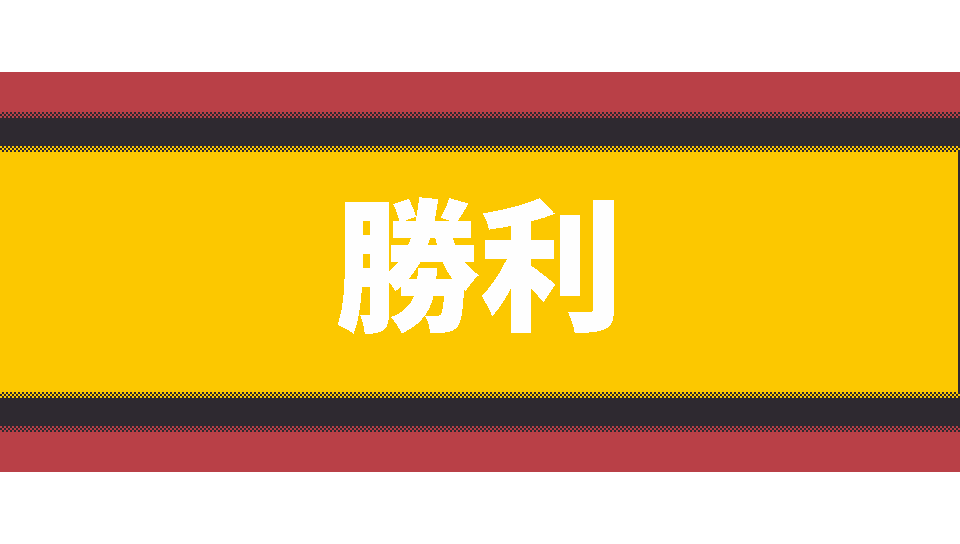
<style>
.page{position:relative;width:960px;height:544px;background:#fcc800}
.page>*{position:absolute;margin:0}
.t1{font:144px "SourceHanSansJP-Heavy";color:#fefefe}
</style>
<div class="page">
<p class="t1" style="left:338px;top:197px;width:276px;height:137px">勝利</p>
</div>
